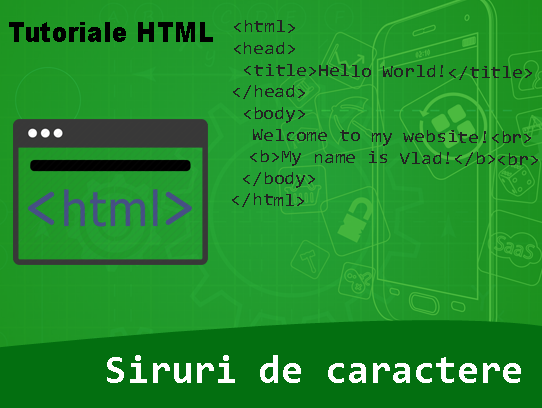
<style>
.page{position:relative;width:542px;height:408px}
.page>*{position:absolute;margin:0}
.t1{font:28.1px "Arial-Black";color:#000000;scale:0.87 1}
.t2{font:18px "Consolas";color:#232323;scale:1.09 1}
.t3{font:40px "Consolas-Bold";color:#ffffff}
</style>
<div class="page">
<p class="t1" style="left:9px;top:22px;width:204px;height:20px">Tutoriale HTML</p>
<p class="t2" style="left:232px;top:20px;width:306px;height:187px;rotate:1deg">&lt;html&gt;<br>&lt;head&gt;<br> &lt;title&gt;Hello World!&lt;/title&gt;<br>&lt;/head&gt;<br> &lt;body&gt;<br>  Welcome to my website!&lt;br&gt;<br> &lt;b&gt;My name is Vlad!&lt;/b&gt;&lt;br&gt;<br> &lt;/body&gt;<br>&lt;/html&gt;</p>
<p class="t3" style="left:107px;top:355px;width:414px;height:28px">Siruri de caractere</p>
</div>
